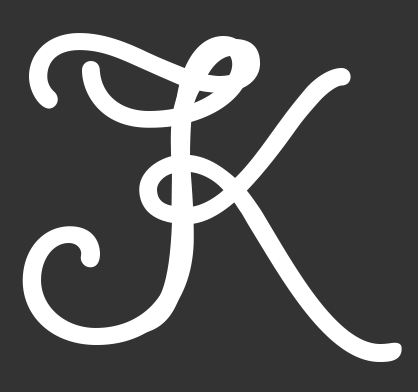
<style>
.page{position:relative;width:418px;height:392px;background:#333333}
.page>*{position:absolute;margin:0}
.t1{font:416.7px "GiddyupStd";letter-spacing:0.01em;color:#ffffff}
.t2{font:416.7px "GiddyupStd";letter-spacing:0.01em;color:#ffffff;scale:0.97 1}
</style>
<div class="page">
<p class="t1" style="left:22px;top:33px;width:238px;height:312px">J</p>
<p class="t2" style="left:82px;top:36px;width:320px;height:326px">K</p>
</div>
